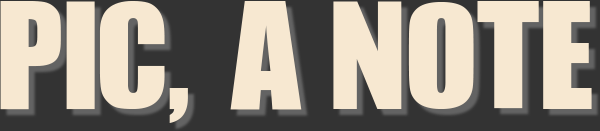
<style>
.page{position:relative;width:600px;height:131px;background:#f7e8d1}
.page>*{position:absolute;margin:0}
.t1{font:160px "JCHEadA";letter-spacing:-0.02em;color:#f7e8d1}
</style>
<div class="page">
<p class="t1" style="left:0px;top:1px;width:592px;height:122px">PIC, A NOTE</p>
</div>
